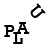
<style>
.page{position:relative;width:48px;height:48px;background:#ffffff}
.page>*{position:absolute;margin:0}
.t1{font:18px "Rockwell";color:#000000}
</style>
<div class="page">
<p class="t1" style="left:30px;top:3px;width:16px;height:15px;rotate:51deg">U</p>
<p class="t1" style="left:4px;top:25px;width:11px;height:12px">P</p>
<p class="t1" style="left:16px;top:22px;width:14px;height:12px">A</p>
<p class="t1" style="left:13px;top:32px;width:10px;height:12px">L</p>
</div>
